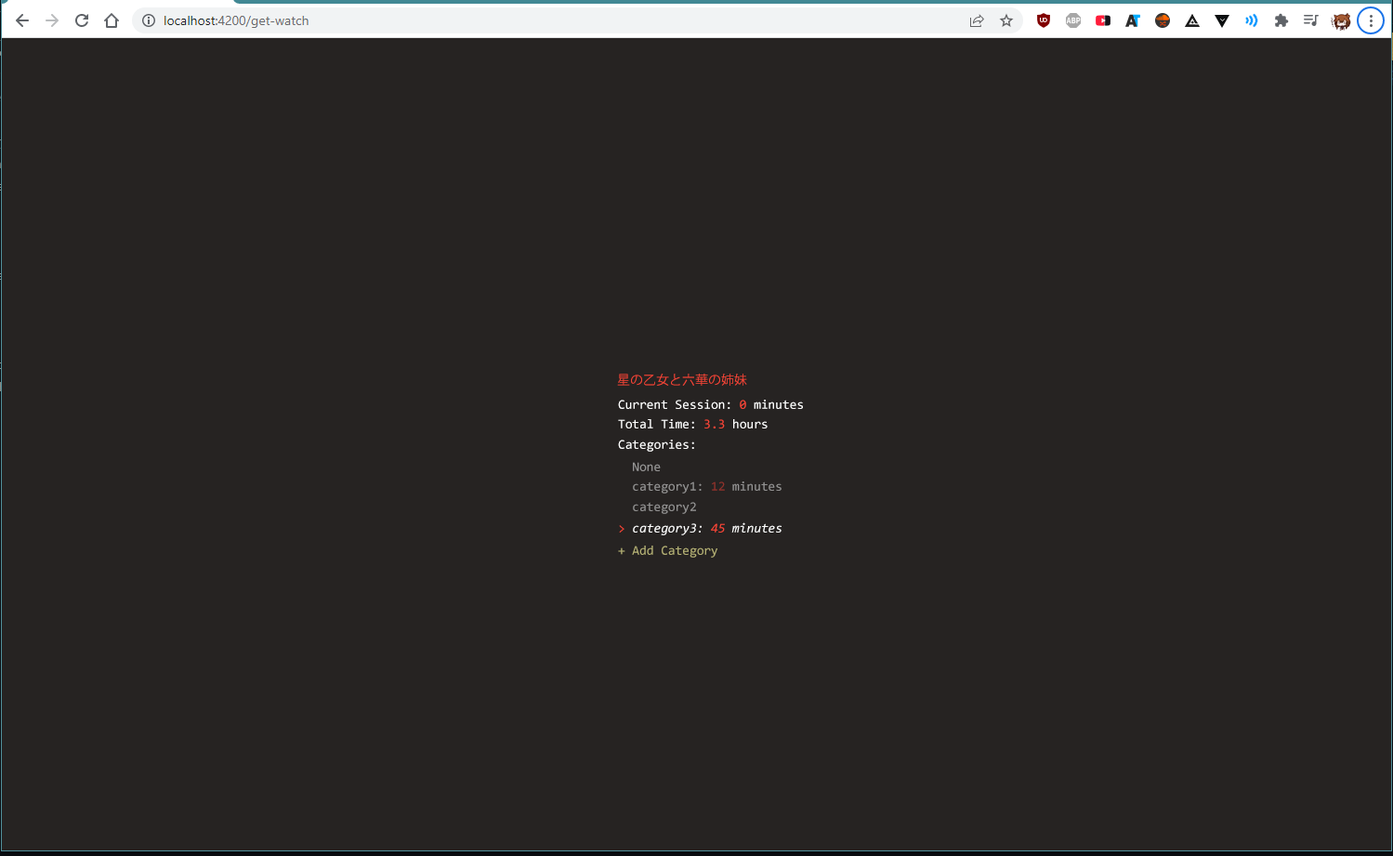
<style>
.page{position:relative;width:1393px;height:856px;background:#262322}
.page>*{position:absolute;margin:0}
.t1{font:13px "KozGoPr6N-Regular";color:#f84637}
.t2{font:13px "Consolas";color:#ffffff}
.t3{font:13px "Consolas";color:#f84637}
.t4{font:13px "Consolas";color:#969595}
.t5{font:13px "Consolas";color:#939292}
.t6{font:13px "Consolas-Italic";color:#ffffff}
.t7{font:13px "Consolas-Italic";color:#f84637}
.t8{font:13px "Consolas";color:#b3af74}
</style>
<div class="page">
<p class="t1" style="left:617px;top:374px;width:130px;height:12px">星の乙女と六華の姉妹</p>
<p class="t2" style="left:618px;top:400px;width:185px;height:9px">Current Session: <span class="t3">0 </span>minutes</p>
<p class="t2" style="left:618px;top:419px;width:150px;height:9px">Total Time: <span class="t3">3.3 </span>hours</p>
<p class="t2" style="left:618px;top:440px;width:76px;height:12px">Categories:</p>
<p class="t4" style="left:633px;top:462px;width:28px;height:9px">None</p>
<p class="t5" style="left:633px;top:481px;width:149px;height:12px">category1: 12 minutes</p>
<p class="t5" style="left:633px;top:502px;width:63px;height:12px">category2</p>
<p class="t6" style="left:619px;top:522px;width:163px;height:13px"><span class="t3">&gt; </span>category3: <span class="t7">45</span> minutes</p>
<p class="t8" style="left:618px;top:546px;width:99px;height:12px">+ Add Category</p>
</div>
